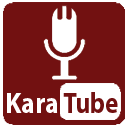
<style>
.page{position:relative;width:128px;height:128px;background:#721111}
.page>*{position:absolute;margin:0}
.t1{font:29.6px "MyriadPro-Bold";color:#ffffff;scale:0.89 1}
.t2{font:29.7px "MyriadPro-Bold";color:#721111;scale:0.84 1}
</style>
<div class="page">
<p class="t1" style="left:7px;top:93px;width:51px;height:20px">Kara</p>
<p class="t2" style="left:63px;top:92px;width:55px;height:21px">Tube</p>
</div>
